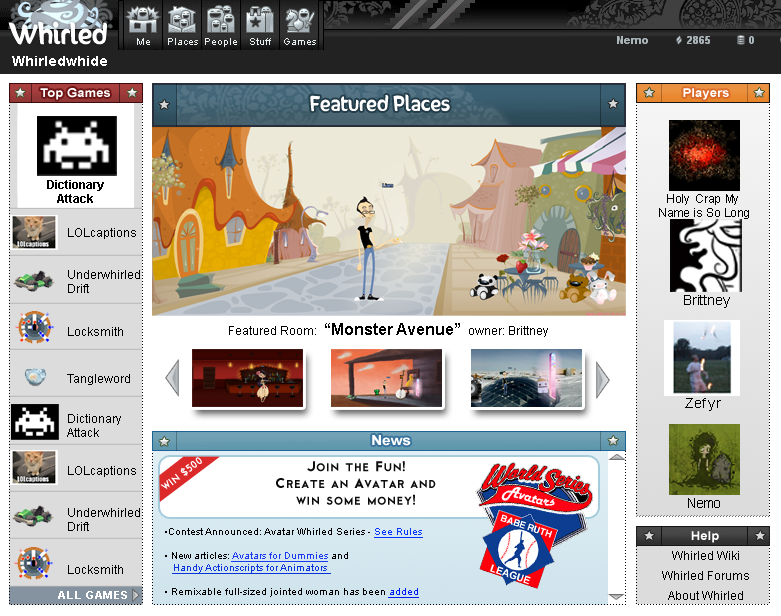
<style>
.page{position:relative;width:781px;height:616px;background:#ffffff}
.page>*{position:absolute;margin:0}
.t1{font:14px "Arial-BoldMT";color:#ffffff}
.t2{font:12px "Arial-BoldMT";color:#ffffff;scale:1.1 1}
.t3{font:18px "SunnySide";letter-spacing:0.005em;color:#ffffff}
.t4{font:12px "Arial-BoldMT";color:#000000}
.t5{font:12px "ArialMT";color:#000000}
.t6{font:14px "ArialMT";color:#000000}
.t7{font:16px "Arial-BoldMT";color:#000000}
.t8{font:14px "Arial-BoldMT";color:#ffffff;scale:1.1 1}
.t9{font:14px "Cityof";color:#0c0c0c}
.t10{font:10px "ArialMT";color:#000000}
.t11{font:10px "ArialMT";color:#0036ff;text-decoration:underline}
.t12{font:10px "ArialMT";color:#1a39f1;text-decoration:underline}
.t13{font:10px "ArialMT";color:#0b33dc;text-decoration:underline}
.t14{font:10px "ArialMT";color:#001df3;text-decoration:underline}
.t15{font:12px/10px "ArialMT";color:#000000}
.t16{font:11px "Arial-BoldMT";letter-spacing:0.07em;color:#ffffff}
</style>
<div class="page">
<p class="t1" style="left:12px;top:56px;width:95px;height:10px">Whirledwhide</p>
<p class="t2" style="left:40px;top:88px;width:70px;height:12px">Top Games</p>
<p class="t2" style="left:683px;top:88px;width:46px;height:12px">Players</p>
<p class="t3" style="left:310px;top:94px;width:140px;height:18px">Featured Places</p>
<p class="t4" style="left:47px;top:180px;width:57px;height:23px;text-align:center">Dictionary<br>Attack</p>
<p class="t5" style="left:659px;top:194px;width:90px;height:25px;text-align:center">Holy Crap My Name is So Long</p>
<p class="t5" style="left:68px;top:228px;width:68px;height:11px">LOLcaptions</p>
<p class="t5" style="left:68px;top:270px;width:72px;height:23px">Underwhirled<br>Drift</p>
<p class="t6" style="left:684px;top:295px;width:46px;height:13px">Brittney</p>
<p class="t5" style="left:68px;top:327px;width:55px;height:9px">Locksmith</p>
<p class="t7" style="left:229px;top:323px;width:319px;height:14px"><span class="t5">Featured Room:  </span>“Monster Avenue”  <span class="t5">owner: Brittney</span></p>
<p class="t5" style="left:67px;top:374px;width:63px;height:11px">Tangleword</p>
<p class="t6" style="left:685px;top:398px;width:36px;height:13px">Zefyr</p>
<p class="t5" style="left:67px;top:414px;width:54px;height:23px">Dictionary<br>Attack</p>
<p class="t8" style="left:372px;top:435px;width:39px;height:11px">News</p>
<p class="t9" style="left:276px;top:461px;width:160px;height:44px;text-align:center">Join the Fun! <br>Create an Avatar and<br>win some money!</p>
<p class="t5" style="left:68px;top:466px;width:68px;height:11px">LOLcaptions</p>
<p class="t5" style="left:68px;top:508px;width:72px;height:23px">Underwhirled<br>Drift</p>
<p class="t6" style="left:688px;top:498px;width:32px;height:10px">Nemo</p>
<p class="t10" style="left:165px;top:528px;width:258px;height:70px">•Contest Announced: Avatar Whirled Series - <span class="t11">See Rules<br></span><br>• New articles: <span class="t12">Avatars for Dummies</span> and <br>   <span class="t13">Handy Actionscripts for Animators <br></span><br>• Remixable full-sized jointed woman has been <span class="t14">added</span></p>
<p class="t2" style="left:691px;top:531px;width:28px;height:12px">Help</p>
<p class="t15" style="left:662px;top:551px;width:87px;height:49px;text-align:center">Whirled Wiki<br><br>Whirled Forums<br><br>About Whirled</p>
<p class="t5" style="left:68px;top:565px;width:55px;height:9px">Locksmith</p>
<p class="t16" style="left:58px;top:591px;width:69px;height:8px">ALL GAMES</p>
</div>
